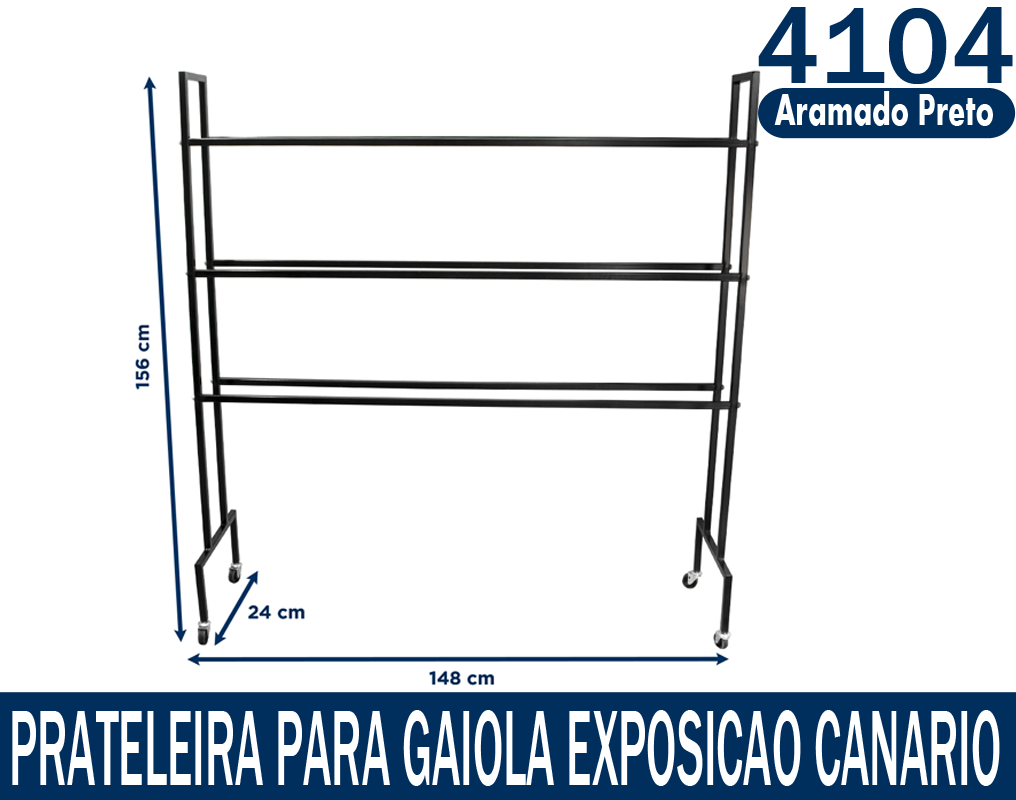
<style>
.page{position:relative;width:1016px;height:800px;background:#ffffff}
.page>*{position:absolute;margin:0}
.t1{font:111.2px "FranklinGothic-Medium";color:#002e5d}
.t2{font:45.9px "Aharoni-Bold";color:#ffffff;scale:0.66 1}
.t3{font:111.2px "FranklinGothic-Medium";color:#ffffff;scale:0.42 1}
</style>
<div class="page">
<p class="t1" style="left:758px;top:7px;width:255px;height:77px">4104</p>
<p class="t2" style="left:774px;top:91px;width:219px;height:35px">Aramado Preto</p>
<p class="t3" style="left:12px;top:710px;width:988px;height:76px">PRATELEIRA PARA GAIOLA EXPOSICAO CANARIO</p>
</div>
